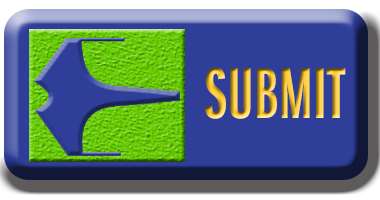
<style>
.page{position:relative;width:380px;height:200px;background:#2f3f99}
.page>*{position:absolute;margin:0}
.t1{font:75px "FranklinGothicURWExtComD-Dem"}
</style>
<div class="page">
<p class="t1" style="left:205px;top:67px;width:141px;height:52px">SUBMIT</p>
</div>
